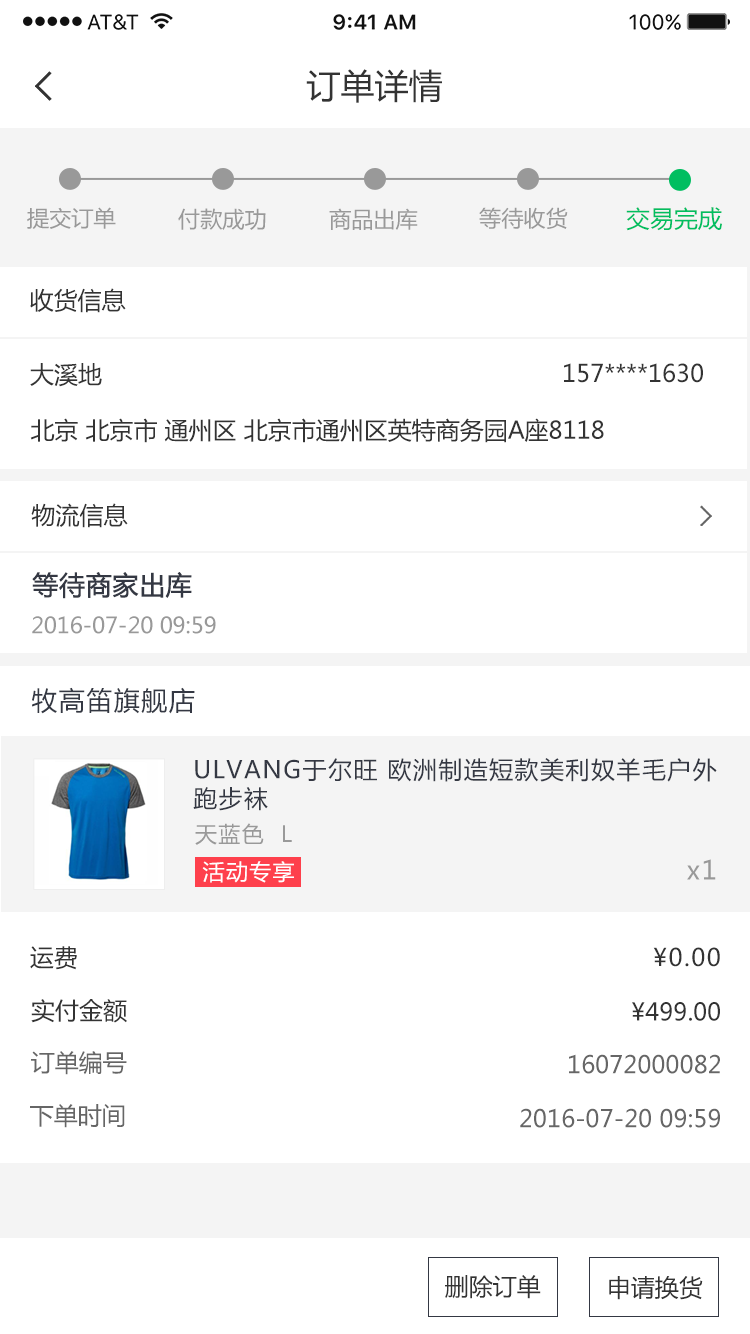
<style>
.page{position:relative;width:750px;height:1334px;background:#ffffff}
.page>*{position:absolute;margin:0}
.t1{font:34px "MicrosoftYaHei";color:#333333}
.t2{font:22px "MicrosoftYaHei";color:#999999}
.t3{font:23.8px "MicrosoftYaHei";color:#00be60}
.t4{font:24px "MicrosoftYaHei";color:#333333}
.t5{font:26px "MicrosoftYaHei";color:#343843;font-weight:bold}
.t6{font:26px "MicrosoftYaHei";letter-spacing:0.06em;color:#343843}
.t7{font:24px "MicrosoftYaHei";letter-spacing:0.06em;color:#343843}
.t8{font:22px "MicrosoftYaHei";letter-spacing:0.06em;color:#999999}
.t9{font:22px "MicrosoftYaHei";letter-spacing:0.06em;color:#ffffff}
.t10{font:26px "MicrosoftYaHei";letter-spacing:0.06em;color:#999999}
.t11{font:24px "MicrosoftYaHei";letter-spacing:0.06em;color:#333333}
.t12{font:24px "MicrosoftYaHei";color:#666666}
</style>
<div class="page">
<p class="t1" style="left:306px;top:69px;width:136px;height:34px">订单详情</p>
<p class="t2" style="left:27px;top:207px;width:89px;height:22px">提交订单</p>
<p class="t2" style="left:178px;top:208px;width:88px;height:22px">付款成功</p>
<p class="t2" style="left:329px;top:208px;width:89px;height:22px">商品出库</p>
<p class="t2" style="left:479px;top:207px;width:89px;height:22px">等待收货</p>
<p class="t3" style="left:626px;top:207px;width:96px;height:24px">交易完成</p>
<p class="t4" style="left:30px;top:288px;width:96px;height:25px">收货信息</p>
<p class="t4" style="left:30px;top:363px;width:72px;height:24px">大溪地</p>
<p class="t4" style="left:564px;top:363px;width:139px;height:20px">157****1630</p>
<p class="t4" style="left:30px;top:418px;width:574px;height:25px">北京 北京市 通州区 北京市通州区英特商务园A座8118</p>
<p class="t4" style="left:31px;top:503px;width:97px;height:25px">物流信息</p>
<p class="t5" style="left:32px;top:572px;width:160px;height:27px">等待商家出库</p>
<p class="t2" style="left:32px;top:616px;width:184px;height:18px">2016-07-20 09:59</p>
<p class="t6" style="left:32px;top:687px;width:163px;height:27px">牧高笛旗舰店</p>
<p class="t7" style="left:193px;top:758px;width:524px;height:53px">ULVANG于尔旺 欧洲制造短款美利奴羊毛户外跑步袜</p>
<p class="t8" style="left:195px;top:823px;width:97px;height:22px">天蓝色  L</p>
<p class="t9" style="left:202px;top:861px;width:92px;height:22px">活动专享</p>
<p class="t10" style="left:687px;top:859px;width:29px;height:21px">x1</p>
<p class="t4" style="left:30px;top:946px;width:47px;height:24px">运费</p>
<p class="t11" style="left:653px;top:947px;width:67px;height:20px">¥0.00</p>
<p class="t4" style="left:31px;top:999px;width:96px;height:24px">实付金额</p>
<p class="t4" style="left:632px;top:1002px;width:88px;height:19px">¥499.00</p>
<p class="t12" style="left:31px;top:1051px;width:96px;height:24px">订单编号</p>
<p class="t12" style="left:569px;top:1054px;width:151px;height:20px">16072000082</p>
<p class="t12" style="left:30px;top:1104px;width:95px;height:24px">下单时间</p>
<p class="t12" style="left:520px;top:1108px;width:200px;height:20px">2016-07-20 09:59</p>
<p class="t4" style="left:445px;top:1275px;width:96px;height:24px">删除订单</p>
<p class="t4" style="left:609px;top:1276px;width:94px;height:24px">申请换货</p>
</div>
